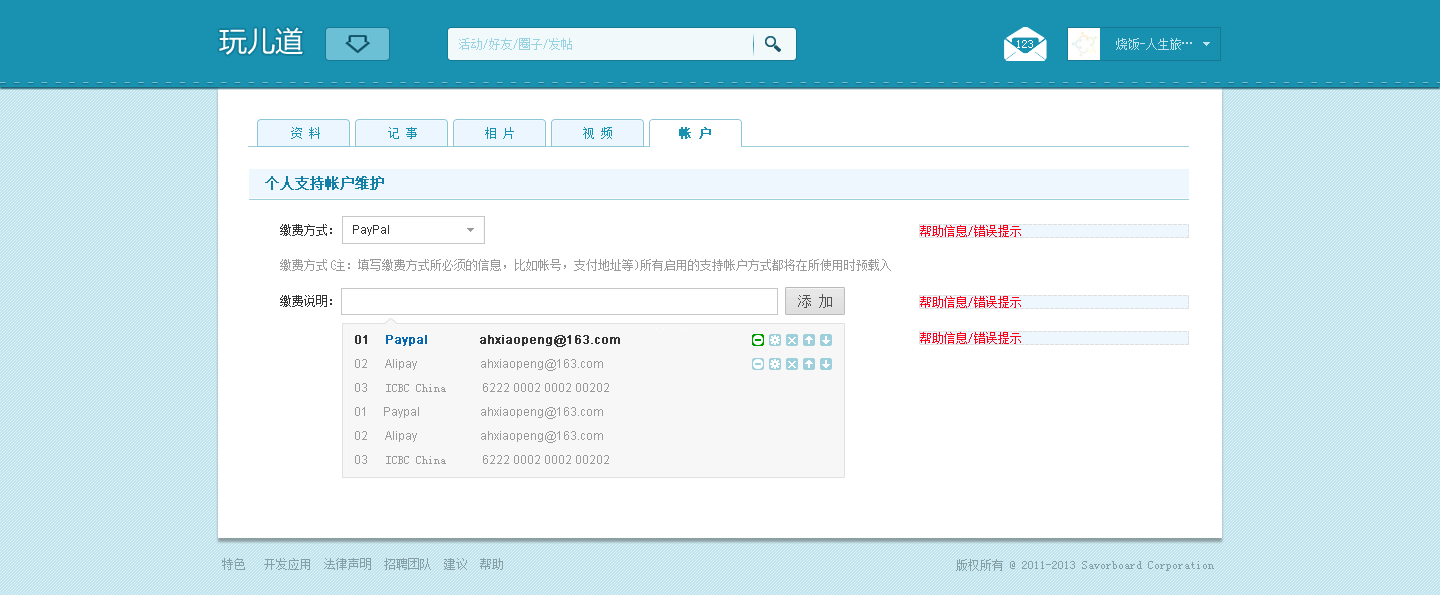
<style>
.page{position:relative;width:1440px;height:595px;background:#ffffff}
.page>*{position:absolute;margin:0}
.t1{font:28px "MicrosoftYaHei";color:#ffffff}
.t2{font:12px "SimSun";color:#98d3e4}
.t3{font:12px "SimSun";color:#ffffff}
.t4{font:12px "SimSun";color:#1992b1}
.t5{font:12px "SimSun";color:#1992b1;font-weight:bold}
.t6{font:14px "SimSun";color:#137fa5;font-weight:bold}
.t7{font:12px "SimSun";color:#333333}
.t8{font:12px "ArialMT";color:#333333}
.t9{font:12px "SimSun";color:#999999}
.t10{font:12px "SimSun";color:#ff0019}
.t11{font:12px/24px "ArialMT";color:#999999}
.t12{font:12px/24px "ArialMT";color:#333333;font-weight:bold}
.t13{font:12px/24px "ArialMT";color:#0666b0;font-weight:bold}
.t14{font:12px/24px "SimSun";color:#999999}
.t15{font:12px "SimSun";color:#849fa6}
</style>
<div class="page">
<p class="t1" style="left:219px;top:27px;width:84px;height:28px">玩儿道</p>
<p class="t2" style="left:459px;top:38px;width:113px;height:12px">活动/好友/圈子/发帖</p>
<p class="t3" style="left:1017px;top:40px;width:16px;height:8px">123</p>
<p class="t4" style="left:291px;top:127px;width:29px;height:12px">资 料</p>
<p class="t4" style="left:388px;top:127px;width:29px;height:12px">记 事</p>
<p class="t4" style="left:485px;top:127px;width:29px;height:12px">相 片</p>
<p class="t4" style="left:583px;top:127px;width:29px;height:12px">视 频</p>
<p class="t5" style="left:679px;top:127px;width:32px;height:12px">帐 户</p>
<p class="t6" style="left:265px;top:176px;width:119px;height:14px">个人支持帐户维护</p>
<p class="t7" style="left:280px;top:224px;width:52px;height:12px">缴费方式：</p>
<p class="t8" style="left:353px;top:225px;width:36px;height:11px">PayPal</p>
<p class="t9" style="left:280px;top:259px;width:611px;height:12px">缴费方式(注：填写缴费方式所必须的信息，比如帐号，支付地址等)所有启用的支持帐户方式都将在所使用时预载入</p>
<p class="t7" style="left:280px;top:295px;width:52px;height:12px">缴费说明：</p>
<p class="t10" style="left:920px;top:296px;width:101px;height:12px">帮助信息/错误提示</p>
<p class="t11" style="left:355px;top:335px;width:265px;height:129px"><span class="t12">01     </span><span class="t13">Paypal                 </span><span class="t12">ahxiaopeng@163.com<br></span>02      Alipay                     ahxiaopeng@163.com<br>03      <span class="t14">ICBC China</span>            6222 0002 0002 00202<br>01     Paypal                    ahxiaopeng@163.com<br>02      Alipay                     ahxiaopeng@163.com<br>03      <span class="t14">ICBC China</span>            6222 0002 0002 00202</p>
<p class="t15" style="left:222px;top:558px;width:281px;height:12px">特色   开发应用  法律声明  招聘团队  建议  帮助</p>
<p class="t15" style="left:956px;top:559px;width:258px;height:12px">版权所有 @ 2011-2013 Savorboard Corporation</p>
</div>
